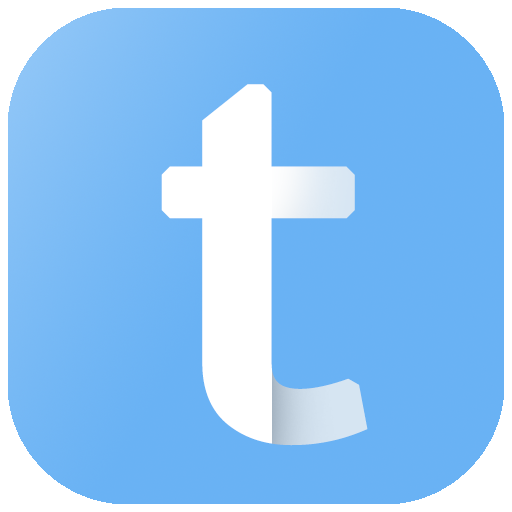
<style>
.page{position:relative;width:512px;height:512px;background:#69b2f4}
.page>*{position:absolute;margin:0}
.t1{font:560px "AverageSans-Regular";color:#ffffff;font-weight:bold;scale:1.15 1}
</style>
<div class="page">
<p class="t1" style="left:161px;top:84px;width:207px;height:362px">t</p>
</div>
